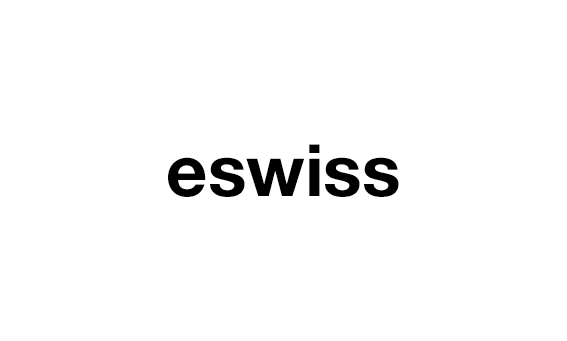
<style>
.page{position:relative;width:567px;height:341px;background:#ffffff}
.page>*{position:absolute;margin:0}
.t1{font:72px "HelveticaNeue-Bold";color:#000000}
</style>
<div class="page">
<p class="t1" style="left:168px;top:144px;width:231px;height:53px">eswiss</p>
</div>
